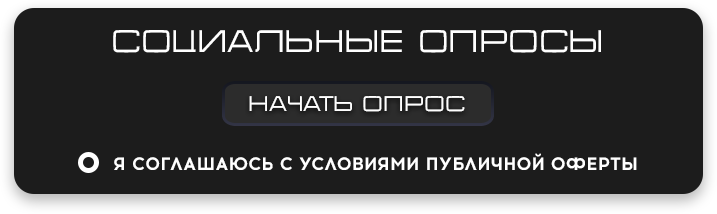
<style>
.page{position:relative;width:717px;height:214px;background:#1c1c1c}
.page>*{position:absolute;margin:0}
.t1{font:30.9px "RadiotechnikaRegular";color:#ffffff}
.t2{font:21px "RadiotechnikaRegular";color:#ffffff}
.t3{font:18px "Acrom-Bold";color:#ffffff}
</style>
<div class="page">
<p class="t1" style="left:113px;top:30px;width:488px;height:23px">социальные опросы</p>
<p class="t2" style="left:249px;top:96px;width:216px;height:16px">начать опрос</p>
<p class="t3" style="left:114px;top:153px;width:523px;height:17px">Я СОГЛАШАЮСЬ С УСЛОВИЯМИ ПУБЛИЧНОЙ ОФЕРТЫ</p>
</div>
